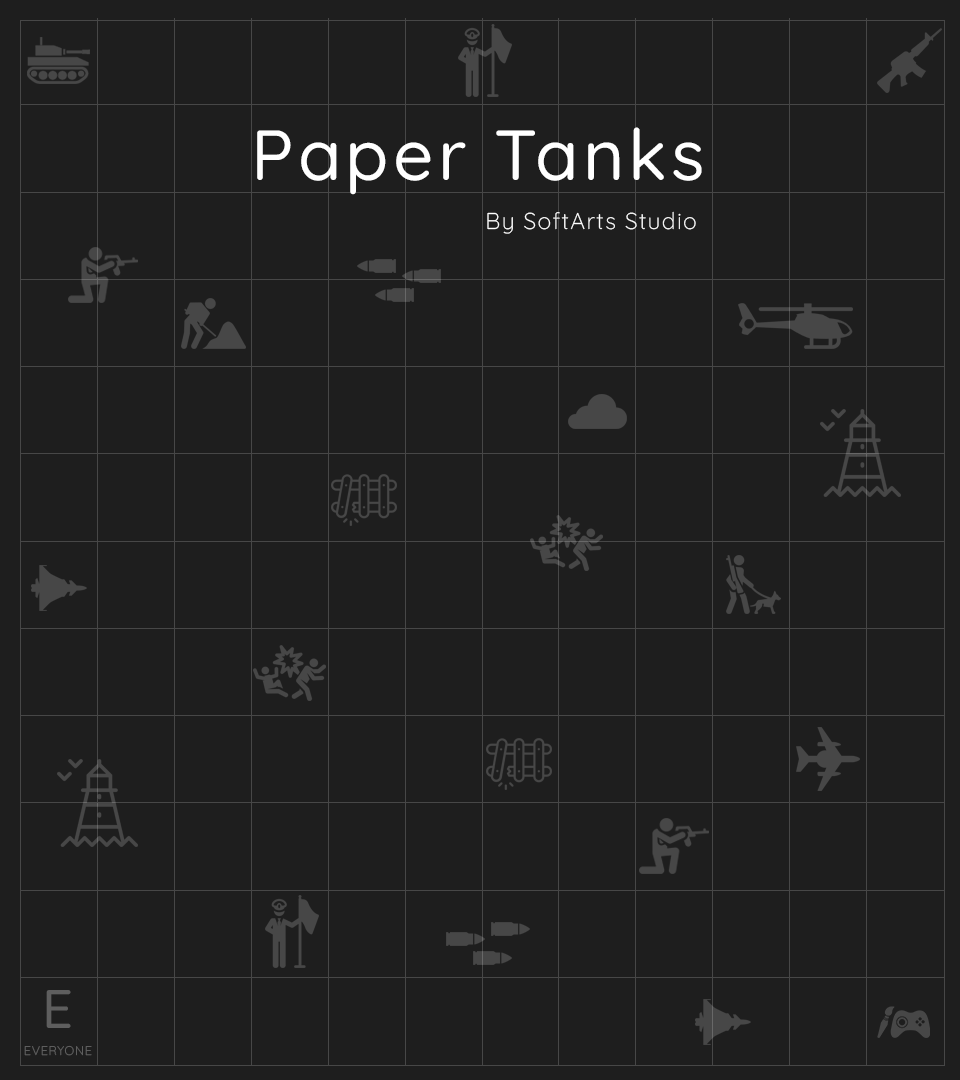
<style>
.page{position:relative;width:960px;height:1080px;background:#1e1e1e}
.page>*{position:absolute;margin:0}
.t1{font:70.8px "Quicksand-Medium";letter-spacing:0.06em;color:#ffffff}
.t2{font:22.9px "Quicksand-Light";letter-spacing:0.06em;color:#ffffff}
.t3{font:54.2px "Quicksand-Medium";letter-spacing:0.06em;color:#5e5e5e}
.t4{font:12.5px "Quicksand-Light";letter-spacing:0.06em;color:#5e5e5e}
</style>
<div class="page">
<p class="t1" style="left:257px;top:127px;width:445px;height:68px">Paper Tanks</p>
<p class="t2" style="left:487px;top:211px;width:209px;height:23px">By SoftArts Studio</p>
<p class="t3" style="left:46px;top:990px;width:25px;height:38px">E</p>
<p class="t4" style="left:24px;top:1045px;width:68px;height:11px">EVERYONE</p>
</div>
